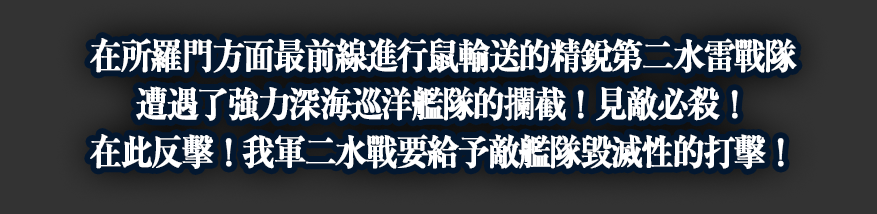
<style>
.page{position:relative;width:877px;height:214px;background:#333333}
.page>*{position:absolute;margin:0}
.t1{font:36px/48px "RyuminPro-Bold";letter-spacing:-0.08em;color:#ffffff;font-weight:bold;scale:0.9 1}
.t2{font:36px/48px "RyuminPr6N-Light";letter-spacing:-0.08em;color:#ffffff;font-weight:bold;scale:0.9 1}
</style>
<div class="page">
<p class="t1" style="left:90px;top:38px;width:707px;height:131px;text-align:center">在所羅門方面最前線進行鼠輸送的精銳第二水雷戰隊<br>遭遇了強力深海巡洋艦隊的<span class="t2">攔</span>截！見敵必殺！<br>在此反擊！我軍二水戰要給予敵艦隊毀滅性的打擊！</p>
</div>
